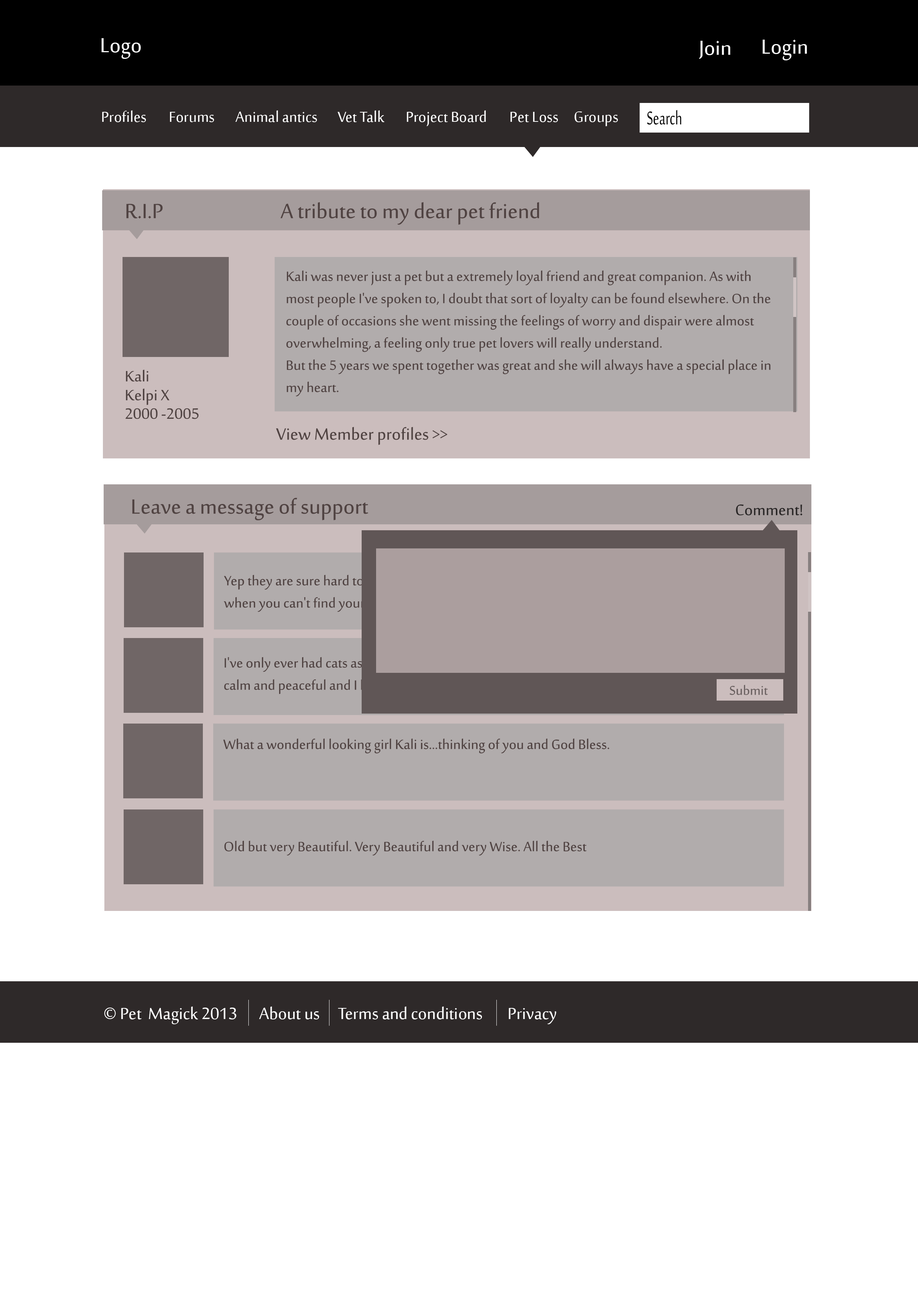
<style>
.page{position:relative;width:918px;height:1299px;background:#ffffff}
.page>*{position:absolute;margin:0}
.t1{font:27.8px "SakkalMajalla";color:#ffffff}
.t2{font:19.8px "SakkalMajalla";color:#ffffff}
.t3{font:25.6px "SakkalMajalla";color:#000000;scale:0.67 1}
.t4{font:28.3px "SakkalMajalla";color:#504342}
.t5{font:18.5px "SakkalMajalla";color:#504342}
.t6{font:20.6px "SakkalMajalla";color:#504342}
.t7{font:22.5px "SakkalMajalla";color:#504342}
.t8{font:21px "SakkalMajalla";color:#2a2727}
.t9{font:18.5px "SakkalMajalla"}
.t10{font:17.5px "SakkalMajalla";color:#6b6161}
.t11{font:22.1px "SakkalMajalla";color:#ffffff}
</style>
<div class="page">
<p class="t1" style="left:101px;top:38px;width:40px;height:21px">Logo</p>
<p class="t1" style="left:699px;top:41px;width:31px;height:18px">Join</p>
<p class="t1" style="left:763px;top:40px;width:44px;height:20px">Login</p>
<p class="t2" style="left:102px;top:110px;width:44px;height:12px">Profiles</p>
<p class="t2" style="left:170px;top:112px;width:44px;height:10px">Forums</p>
<p class="t2" style="left:235px;top:110px;width:82px;height:12px">Animal antics</p>
<p class="t2" style="left:338px;top:110px;width:47px;height:12px">Vet Talk</p>
<p class="t2" style="left:407px;top:110px;width:79px;height:16px">Project Board</p>
<p class="t2" style="left:511px;top:112px;width:47px;height:10px">Pet Loss</p>
<p class="t2" style="left:575px;top:111px;width:43px;height:15px">Groups</p>
<p class="t3" style="left:647px;top:110px;width:35px;height:15px">Search</p>
<p class="t4" style="left:126px;top:204px;width:37px;height:14px">R.I.P</p>
<p class="t4" style="left:280px;top:202px;width:259px;height:23px">A tribute to my dear pet friend</p>
<p class="t5" style="left:286px;top:270px;width:485px;height:127px">Kali was never just a pet but a extremely loyal friend and great companion. As with most people I've spoken to, I doubt that sort of loyalty can be found elsewhere. On the couple of occasions she went missing the feelings of worry and dispair were almost overwhelming, a feeling only true pet lovers will really understand.<br>But the 5 years we spent together was great and she will always have a special place in my heart.<br>Rest in peace my Wonderful Friend...will catch up down the track sometime...Mike.</p>
<p class="t6" style="left:126px;top:369px;width:22px;height:13px">Kali</p>
<p class="t6" style="left:126px;top:388px;width:44px;height:17px">Kelpi X</p>
<p class="t6" style="left:126px;top:408px;width:73px;height:11px">2000 -2005</p>
<p class="t7" style="left:276px;top:427px;width:172px;height:18px">View Member profiles &gt;&gt;</p>
<p class="t4" style="left:132px;top:498px;width:236px;height:22px">Leave a message of support</p>
<p class="t8" style="left:736px;top:504px;width:67px;height:12px">Comment!</p>
<p class="t9" style="left:224px;top:575px;width:499px;height:37px">Yep they are sure hard to beat in the loyalty department. And i know that feeling of dread<br>when you can't find your best mate. Nice to hear about Kali...Take care.</p>
<p class="t10" style="left:730px;top:685px;width:38px;height:10px">Submit</p>
<p class="t5" style="left:223px;top:738px;width:386px;height:15px">What a wonderful looking girl Kali is...thinking of you and God Bless.</p>
<p class="t5" style="left:224px;top:840px;width:363px;height:16px">Old but very Beautiful. Very Beautiful and very Wise. All the Best</p>
<p class="t11" style="left:104px;top:1006px;width:133px;height:18px">© Pet  Magick 2013</p>
<p class="t11" style="left:259px;top:1006px;width:60px;height:13px">About us</p>
<p class="t11" style="left:338px;top:1006px;width:144px;height:13px">Terms and conditions</p>
<p class="t11" style="left:509px;top:1008px;width:47px;height:16px">Privacy</p>
</div>
